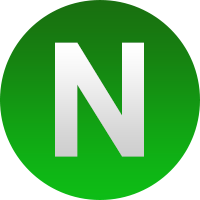
<style>
.page{position:relative;width:200px;height:200px;background:#ffffff}
.page>*{position:absolute;margin:0}
.t1{font:155.5px "Exo-Bold";color:#e7e7e7}
</style>
<div class="page">
<p class="t1" style="left:55px;top:42px;width:89px;height:115px">N</p>
</div>
